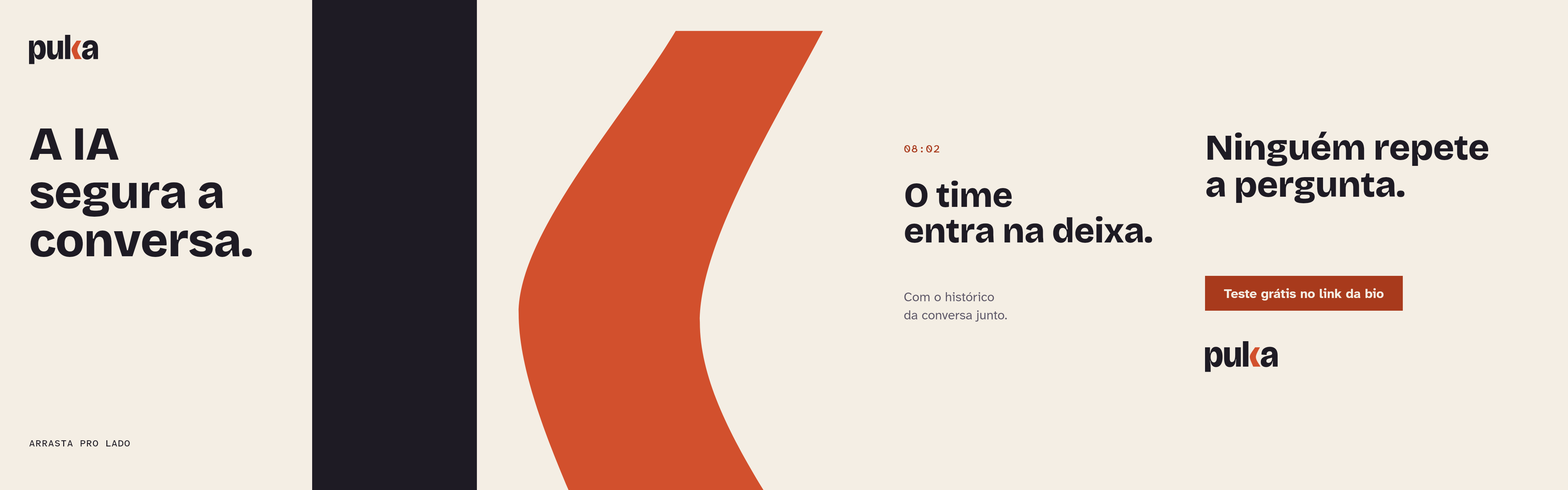
<style>
.page{position:relative;width:1568px;height:490px;background:#f4eee4}
.page>*{position:absolute;margin:0}
.t1{font:47.2px/48.3px "BricolageGrotesque-ExtraBold";letter-spacing:-0.012em;color:#1e1b24}
.t2{font:36.3px/37px "BricolageGrotesque-ExtraBold";letter-spacing:-0.012em;color:#1e1b24}
.t3{font:10.9px "AtkinsonHyperlegibleMono-Medium";letter-spacing:0.04em;color:#a83a1c}
.t4{font:34.8px/35.6px "BricolageGrotesque-ExtraBold";letter-spacing:-0.012em;color:#1e1b24}
.t5{font:13.1px/18.1px "AtkinsonHyperlegibleNext-Regular";color:#5e5868}
.t6{font:13.1px "AtkinsonHyperlegibleNext-Bold";color:#f4eee4}
.t7{font:9.4px "AtkinsonHyperlegibleMono-Medium";letter-spacing:0.04em;color:#1e1b24}
</style>
<div class="page">
<p class="t1" style="left:29px;top:128px;width:223px;height:129px">A IA<br>segura a<br>conversa.</p>
<p class="t2" style="left:1206px;top:131px;width:283px;height:72px">Ninguém repete<br>a pergunta.</p>
<p class="t3" style="left:904px;top:145px;width:35px;height:7px">08:02</p>
<p class="t4" style="left:905px;top:180px;width:247px;height:63px">O time<br>entra na deixa.</p>
<p class="t5" style="left:904px;top:292px;width:103px;height:30px">Com o histórico<br>da conversa junto.</p>
<p class="t6" style="left:1224px;top:288px;width:160px;height:13px">Teste grátis no link da bio</p>
<p class="t7" style="left:29px;top:440px;width:101px;height:6px">ARRASTA PRO LADO</p>
</div>
